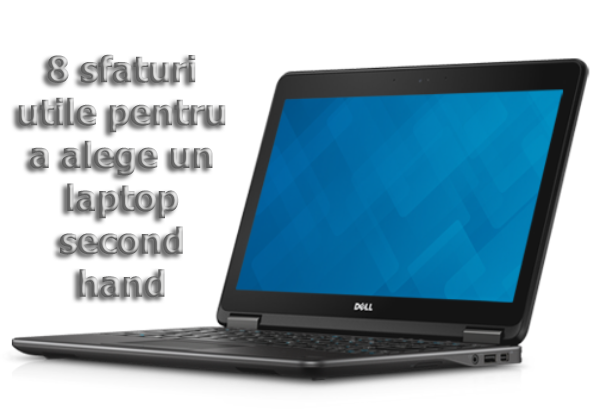
<style>
.page{position:relative;width:600px;height:417px;background:#ffffff}
.page>*{position:absolute;margin:0}
.t1{font:35.7px "Tahoma-Bold"}
</style>
<div class="page">
<p class="t1" style="left:18px;top:54px;width:208px;height:244px;text-align:center">8 sfaturi utile pentru a alege un laptop second hand</p>
</div>
